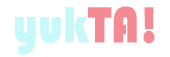
<style>
.page{position:relative;width:170px;height:57px;background:#ffffff}
.page>*{position:absolute;margin:0}
.t1{font:52.5px "Bauhaus93";letter-spacing:-0.005em;color:#c7f8fa;scale:0.89 1}
.t2{font:42px "Bauhaus93";letter-spacing:-0.005em;color:#c6dcdd;scale:0.89 1}
.t3{font:52.5px "Bauhaus93";letter-spacing:-0.005em;color:#f48a94;scale:0.89 1}
</style>
<div class="page">
<p class="t1" style="left:15px;top:6px;width:140px;height:49px"><span class="t2"> </span>yuk<span class="t3">TA!</span></p>
</div>
